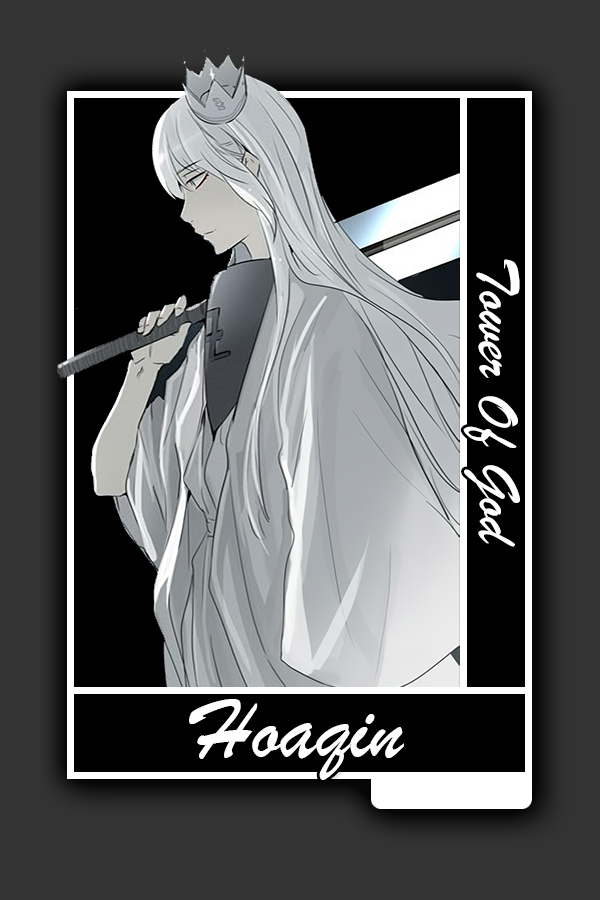
<style>
.page{position:relative;width:600px;height:900px;background:#333333}
.page>*{position:absolute;margin:0}
.t1{font:61.5px "BrushScriptMT";color:#ffffff}
.t2{font:89.7px "BrushScriptMT";color:#ffffff}
</style>
<div class="page">
<p class="t1" style="left:463px;top:259px;width:57px;height:288px;rotate:90deg">Tower Of God</p>
<p class="t2" style="left:189px;top:699px;width:215px;height:81px">Hoaqin</p>
</div>
